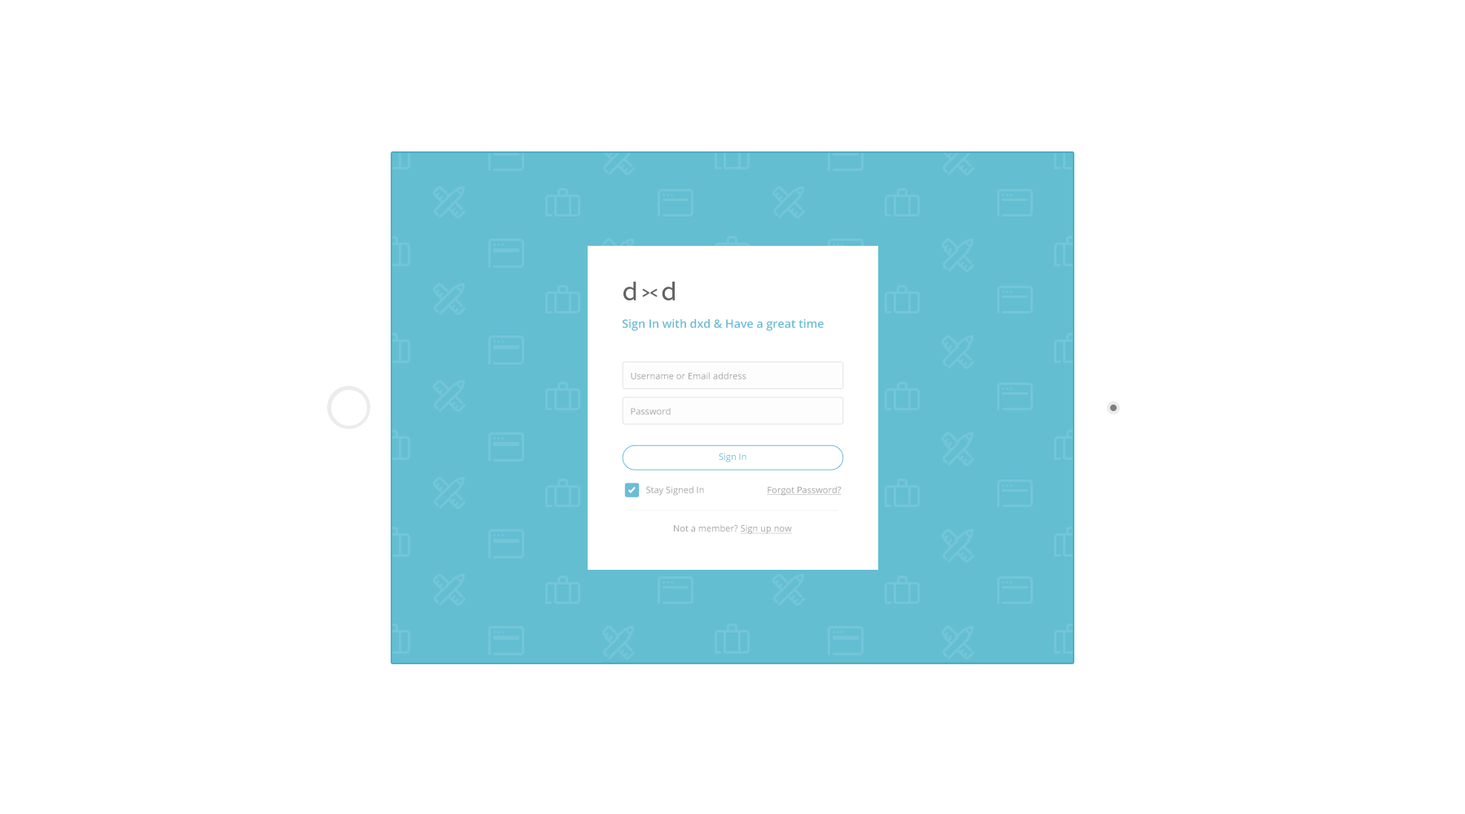
<style>
.page{position:relative;width:1465px;height:814px;background:#ffffff}
.page>*{position:absolute;margin:0}
.t1{font:11.6px "OpenSans-Semibold";color:#63bed2}
.t2{font:9px "OpenSans";color:#a1a1a1}
.t3{font:9px "OpenSans";color:#6abdd4}
.t4{font:9px "OpenSans";color:#a1a1a1;text-decoration:underline}
</style>
<div class="page">
<p class="t1" style="left:623px;top:319px;width:201px;height:12px">Sign In with dxd &amp; Have a great time</p>
<p class="t2" style="left:631px;top:372px;width:116px;height:7px">Username or Email address</p>
<p class="t2" style="left:631px;top:408px;width:40px;height:7px">Password</p>
<p class="t3" style="left:719px;top:453px;width:28px;height:9px">Sign In</p>
<p class="t2" style="left:646px;top:486px;width:58px;height:10px">Stay Signed In</p>
<p class="t4" style="left:767px;top:486px;width:75px;height:10px">Forgot Password?</p>
<p class="t2" style="left:674px;top:524px;width:118px;height:10px">Not a member? <span class="t4">Sign up now</span></p>
</div>
